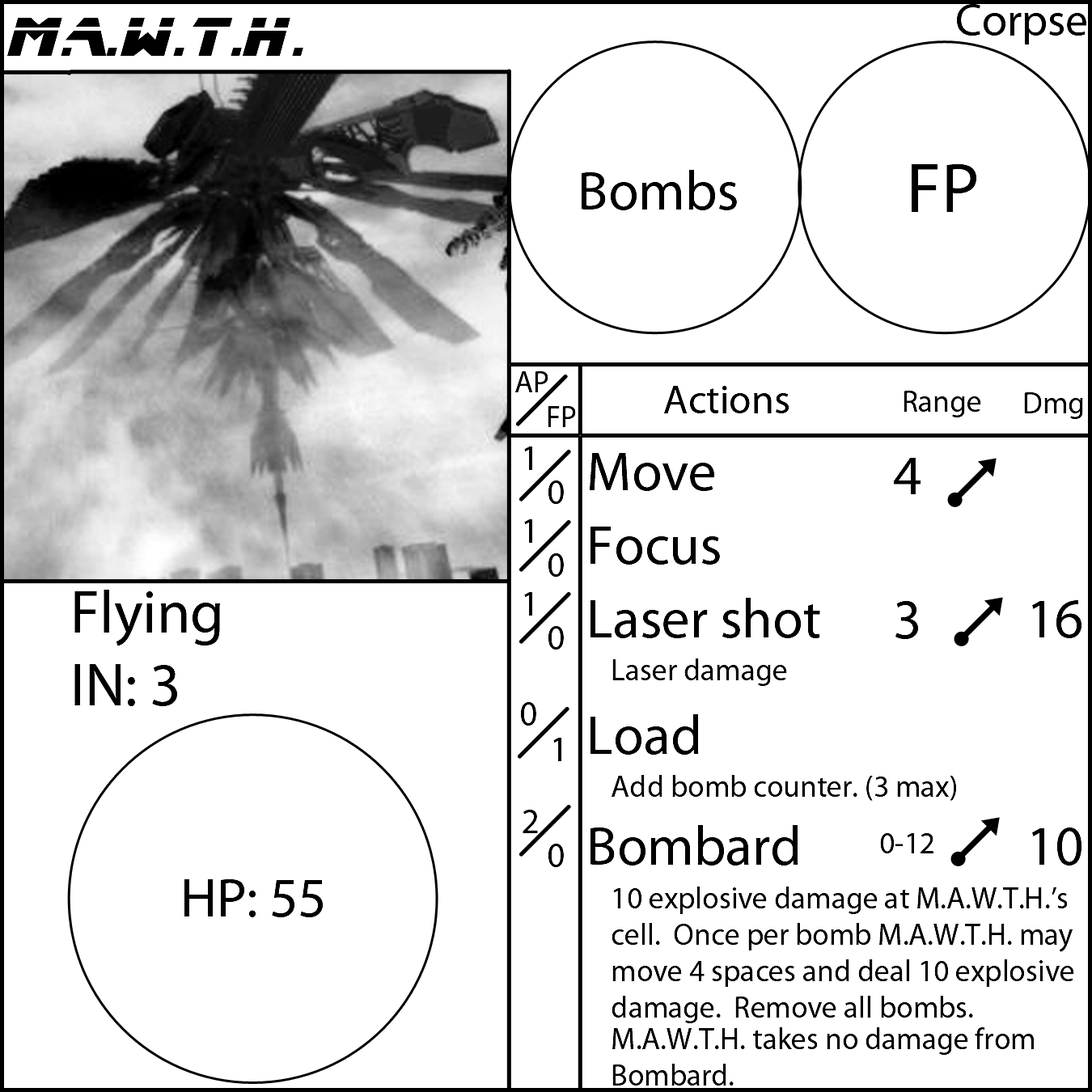
<style>
.page{position:relative;width:1092px;height:1092px;background:#ffffff}
.page>*{position:absolute;margin:0}
.t1{font:55.6px "BladeRunnerMovieFont";color:#000000}
.t2{font:55.6px "MyriadPro-Regular";color:#000000}
.t3{font:70.8px "MyriadPro-Regular";color:#000000}
.t4{font:30.3px "MyriadPro-Regular";color:#000000}
.t5{font:40.4px "MyriadPro-Regular";color:#000000}
.t6{font:35.4px "MyriadPro-Regular";color:#000000}
.t7{font:60.7px "MyriadPro-Regular";color:#000000}
</style>
<div class="page">
<p class="t1" style="left:7px;top:18px;width:296px;height:38px">M.A.W.T.H.</p>
<p class="t2" style="left:582px;top:170px;width:155px;height:40px">Bombs</p>
<p class="t3" style="left:912px;top:164px;width:64px;height:48px">FP</p>
<p class="t4" style="left:515px;top:371px;width:33px;height:21px">AP</p>
<p class="t5" style="left:664px;top:386px;width:125px;height:27px">Actions</p>
<p class="t4" style="left:904px;top:391px;width:77px;height:26px">Range</p>
<p class="t4" style="left:1024px;top:392px;width:59px;height:27px">Dmg</p>
<p class="t4" style="left:548px;top:406px;width:28px;height:21px">FP</p>
<p class="t6" style="left:523px;top:447px;width:15px;height:386px">1<br>1<br>1<br><br><br>2</p>
<p class="t4" style="left:590px;top:453px;width:484px;height:633px"><span class="t2">Move<br>Focus<br>Laser shot<br></span> Laser damage<br><span class="t2">Load</span><br> Add bomb counter. (3 max)<span class="t2">  <br>Bombard<br></span> 10 explosive damage at M.A.W.T.H.’s    cell.  Once per bomb M.A.W.T.H. may   move 4 spaces and deal 10 explosive    damage.  Remove all bombs.<br> M.A.W.T.H. takes no damage from     Bombard.</p>
<p class="t2" style="left:880px;top:458px;width:53px;height:395px;text-align:center">4<br><br>3<br><br>  <br><span class="t4">0-12</span></p>
<p class="t6" style="left:548px;top:480px;width:16px;height:387px">0<br>0<br>0<br><br><br>0</p>
<p class="t7" style="left:74px;top:590px;width:146px;height:116px">Flying<br>IN: 3</p>
<p class="t2" style="left:1032px;top:600px;width:49px;height:265px;text-align:center">16<br><br> <br>10</p>
<p class="t6" style="left:521px;top:702px;width:15px;height:24px">0</p>
<p class="t6" style="left:553px;top:738px;width:8px;height:23px">1</p>
<p class="t2" style="left:184px;top:879px;width:139px;height:38px">HP: 55</p>
</div>
